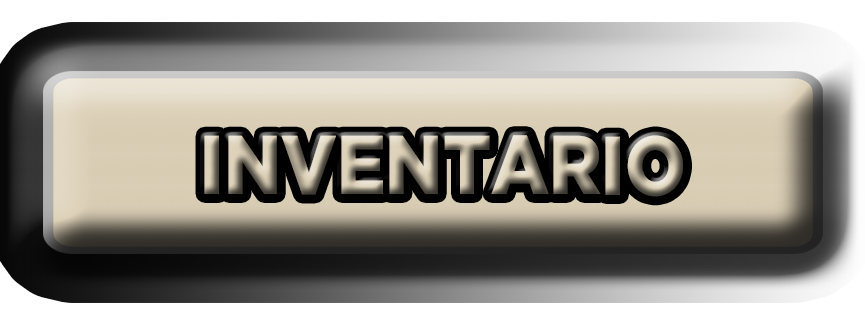
<style>
.page{position:relative;width:865px;height:327px}
.page>*{position:absolute;margin:0}
.t1{font:83.3px "GothamBlack";scale:0.88 1}
</style>
<div class="page">
<p class="t1" style="left:204px;top:135px;width:479px;height:62px">INVENTARIO</p>
</div>
